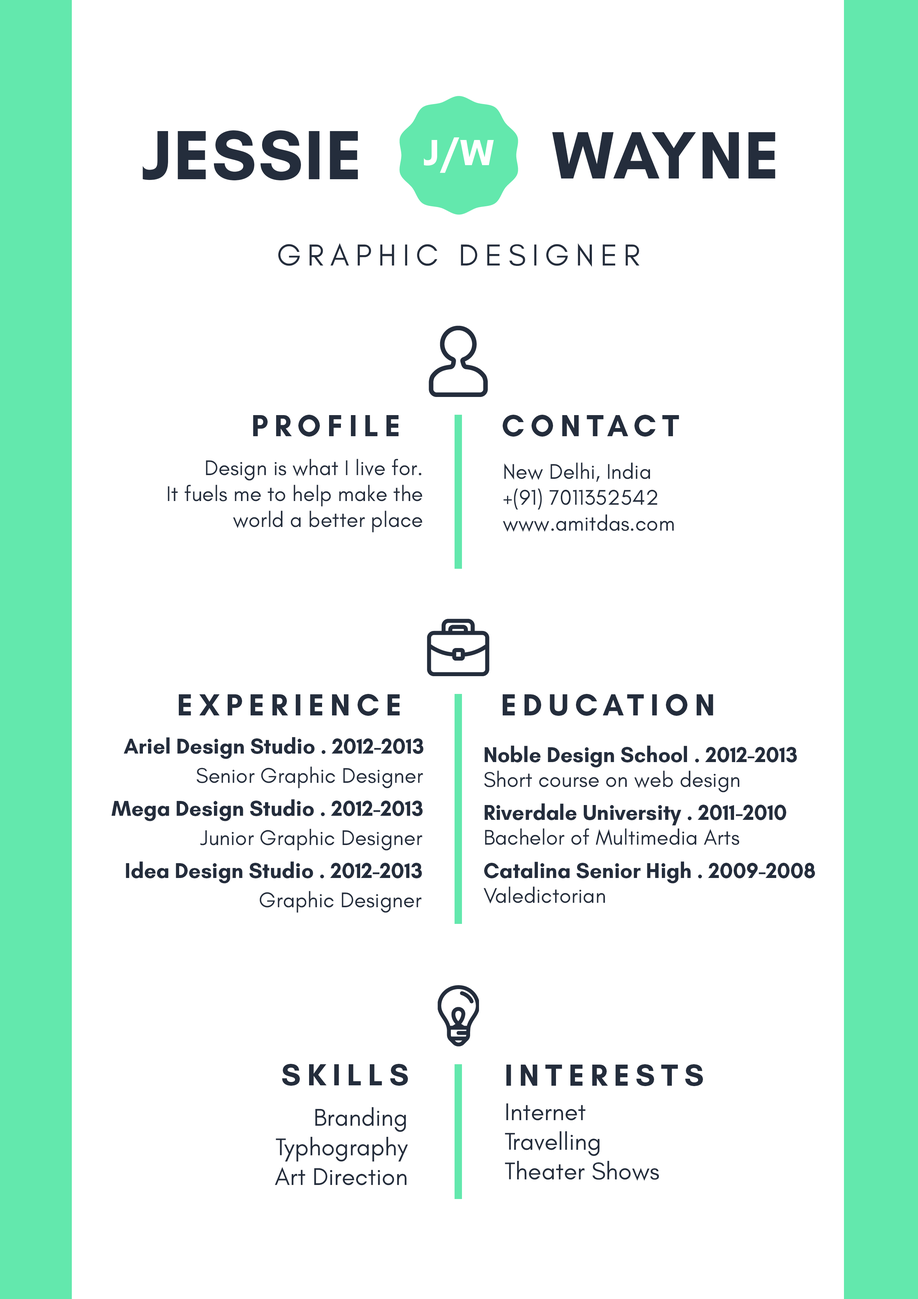
<style>
.page{position:relative;width:918px;height:1299px;background:#ffffff}
.page>*{position:absolute;margin:0}
.t1{font:71px "GlacialIndifference-Bold";letter-spacing:0.025em;color:#242d3c}
.t2{font:37px "GlacialIndifference-Bold";letter-spacing:0.025em;color:#ffffff}
.t3{font:67.9px "GlacialIndifference-Bold";letter-spacing:0.025em;color:#242d3c}
.t4{font:30.9px "GlacialIndifference-Regular";letter-spacing:0.2em;color:#242d3c}
.t5{font:30.9px "GlacialIndifference-Bold";letter-spacing:0.2em;color:#242d3c}
.t6{font:21.6px "GlacialIndifference-Regular";color:#242d3c}
.t7{font:21.6px "GlacialIndifference-Bold";color:#242d3c}
.t8{font:24.7px "GlacialIndifference-Regular";color:#242d3c}
</style>
<div class="page">
<p class="t1" style="left:143px;top:130px;width:215px;height:51px">JESSIE</p>
<p class="t2" style="left:424px;top:137px;width:70px;height:36px">J/W</p>
<p class="t3" style="left:552px;top:132px;width:224px;height:46px">WAYNE</p>
<p class="t4" style="left:278px;top:243px;width:362px;height:24px">GRAPHIC DESIGNER</p>
<p class="t5" style="left:253px;top:415px;width:146px;height:21px">PROFILE</p>
<p class="t5" style="left:503px;top:415px;width:176px;height:21px">CONTACT</p>
<p class="t6" style="left:168px;top:459px;width:254px;height:73px;text-align:right">Design is what I live for.<br>It fuels me to help make the world a better place</p>
<p class="t6" style="left:503px;top:462px;width:171px;height:70px">New Delhi, India<br>+(91) 7011352542<br>www.amitdas.com</p>
<p class="t5" style="left:179px;top:694px;width:221px;height:22px">EXPERIENCE</p>
<p class="t5" style="left:503px;top:694px;width:210px;height:22px">EDUCATION</p>
<p class="t7" style="left:124px;top:737px;width:300px;height:22px">Ariel Design Studio . 2012-2013</p>
<p class="t7" style="left:485px;top:745px;width:312px;height:22px">Noble Design School . 2012-2013</p>
<p class="t6" style="left:197px;top:766px;width:226px;height:22px">Senior Graphic Designer</p>
<p class="t6" style="left:484px;top:770px;width:256px;height:22px">Short course on web design</p>
<p class="t7" style="left:111px;top:799px;width:312px;height:22px">Mega Design Studio . 2012-2013</p>
<p class="t7" style="left:485px;top:803px;width:301px;height:22px">Riverdale University . 2011-2010</p>
<p class="t6" style="left:200px;top:829px;width:222px;height:21px">Junior Graphic Designer</p>
<p class="t6" style="left:485px;top:828px;width:254px;height:18px">Bachelor of Multimedia Arts</p>
<p class="t7" style="left:126px;top:861px;width:296px;height:22px">Idea Design Studio . 2012-2013</p>
<p class="t7" style="left:484px;top:861px;width:331px;height:22px">Catalina Senior High . 2009-2008</p>
<p class="t6" style="left:260px;top:891px;width:162px;height:22px">Graphic Designer</p>
<p class="t6" style="left:484px;top:886px;width:121px;height:18px">Valedictorian</p>
<p class="t5" style="left:282px;top:1064px;width:126px;height:21px">SKILLS</p>
<p class="t5" style="left:506px;top:1064px;width:197px;height:22px">INTERESTS</p>
<p class="t8" style="left:275px;top:1107px;width:133px;height:78px;text-align:right">Branding<br>Typhography<br>Art Direction</p>
<p class="t8" style="left:505px;top:1103px;width:154px;height:78px">Internet<br>Travelling<br>Theater Shows</p>
</div>
